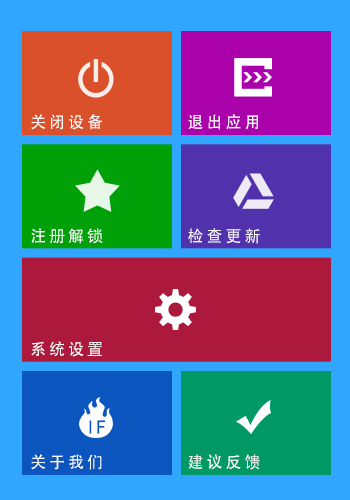
<style>
.page{position:relative;width:350px;height:500px;background:#30a6fe}
.page>*{position:absolute;margin:0}
.t1{font:16.1px "AdobeHeitiStd-Regular";letter-spacing:0.2em;color:#ffffff}
</style>
<div class="page">
<p class="t1" style="left:31px;top:114px;width:71px;height:16px">关闭设备</p>
<p class="t1" style="left:188px;top:114px;width:71px;height:16px">退出应用</p>
<p class="t1" style="left:31px;top:228px;width:72px;height:16px">注册解锁</p>
<p class="t1" style="left:188px;top:228px;width:72px;height:16px">检查更新</p>
<p class="t1" style="left:31px;top:341px;width:72px;height:16px">系统设置</p>
<p class="t1" style="left:31px;top:454px;width:71px;height:16px">关于我们</p>
<p class="t1" style="left:188px;top:454px;width:72px;height:16px">建议反馈</p>
</div>
